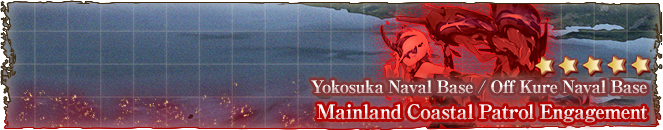
<style>
.page{position:relative;width:663px;height:130px}
.page>*{position:absolute;margin:0}
.t1{font:17px "RyuminPro-ExBold";letter-spacing:-0.04em}
.t2{font:20px "RyuminPro-ExBold";letter-spacing:-0.04em}
</style>
<div class="page">
<p class="t1" style="left:311px;top:80px;width:336px;height:14px">Yokosuka Naval Base / Off Kure Naval Base</p>
<p class="t2" style="left:317px;top:104px;width:330px;height:19px">Mainland Coastal Patrol Engagement</p>
</div>
